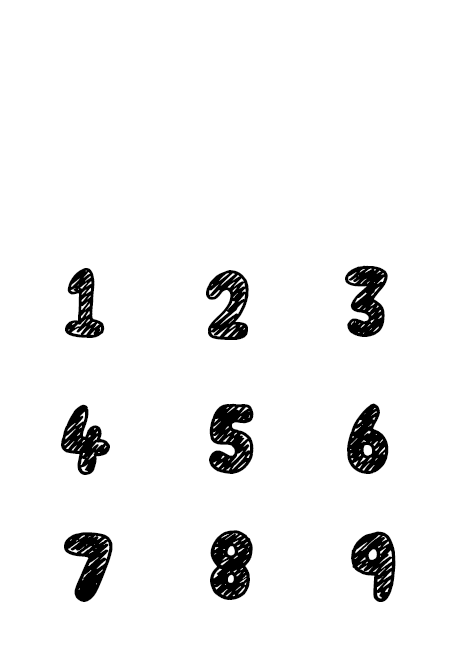
<style>
.page{position:relative;width:450px;height:650px;background:#ffffff}
.page>*{position:absolute;margin:0}
.t1{font:100px "CallMe,Maybe?";color:#000000}
</style>
<div class="page">
<p class="t1" style="left:65px;top:268px;width:40px;height:70px">1</p>
<p class="t1" style="left:206px;top:270px;width:43px;height:70px">2</p>
<p class="t1" style="left:345px;top:265px;width:43px;height:72px">3</p>
<p class="t1" style="left:61px;top:404px;width:49px;height:71px">4</p>
<p class="t1" style="left:209px;top:403px;width:45px;height:71px">5</p>
<p class="t1" style="left:347px;top:403px;width:42px;height:71px">6</p>
<p class="t1" style="left:64px;top:532px;width:49px;height:70px">7</p>
<p class="t1" style="left:210px;top:530px;width:43px;height:70px">8</p>
<p class="t1" style="left:351px;top:531px;width:45px;height:71px">9</p>
</div>
